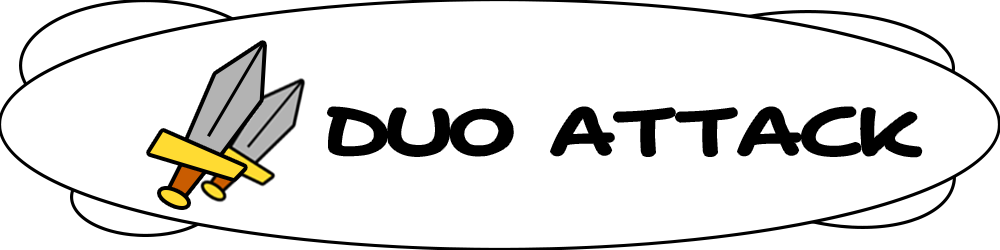
<style>
.page{position:relative;width:1000px;height:250px;background:#ffffff}
.page>*{position:absolute;margin:0}
.t1{font:42.6px "HeyGorgeous";color:#000000;scale:1.28 1}
</style>
<div class="page">
<p class="t1" style="left:328px;top:107px;width:594px;height:50px">DUO ATTACK</p>
</div>
